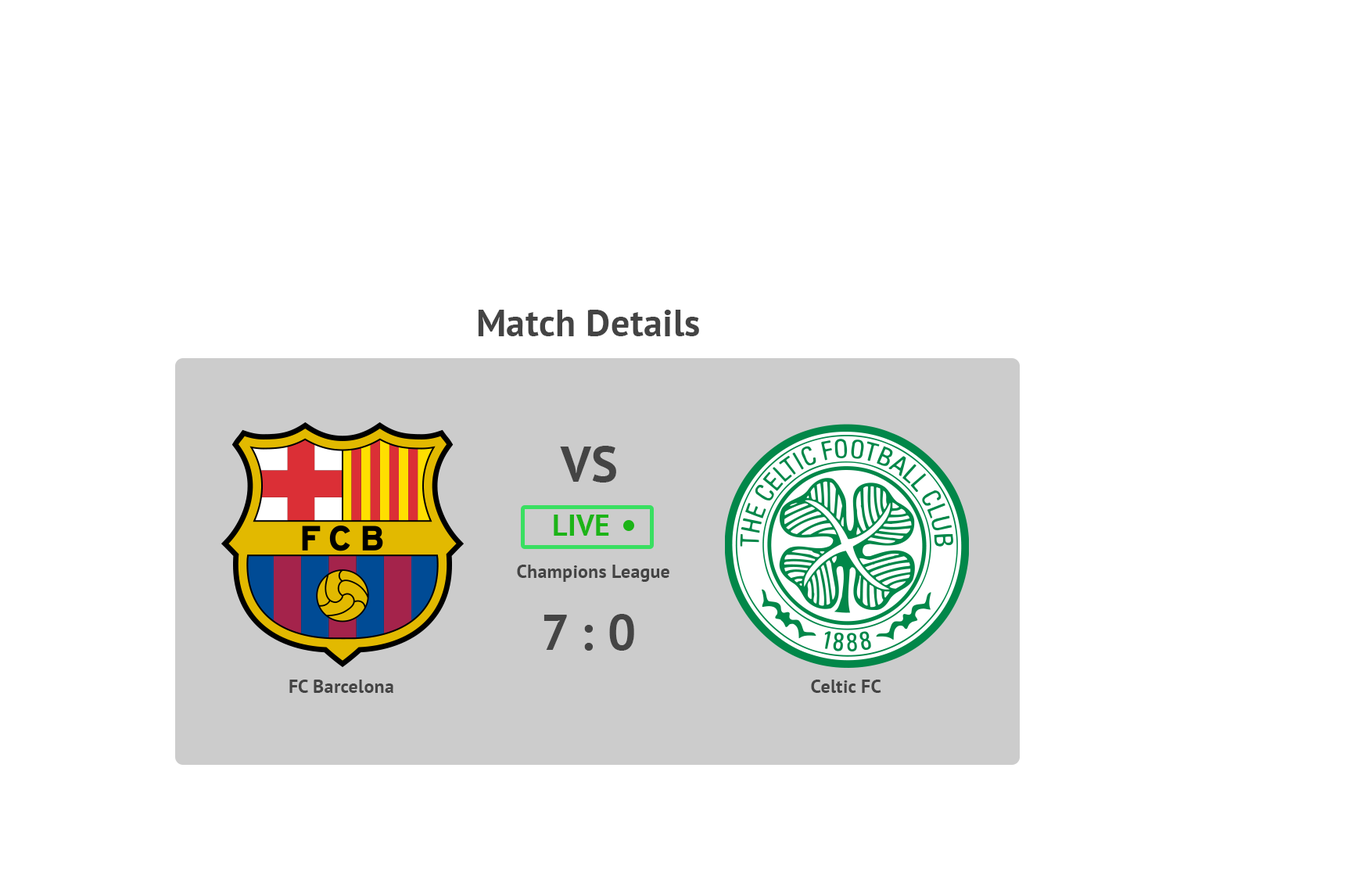
<style>
.page{position:relative;width:1356px;height:879px;background:#ffffff}
.page>*{position:absolute;margin:0}
.t1{font:37.5px "PTSans-Bold";letter-spacing:0.01em;color:#444444}
.t2{font:50.1px "PTSans-Bold";letter-spacing:0.01em;color:#444444}
.t3{font:29.7px "PTSans-Bold";letter-spacing:0.01em;color:#1cb417}
.t4{font:18.8px "PTSans-Bold";letter-spacing:0.01em;color:#444444}
</style>
<div class="page">
<p class="t1" style="left:478px;top:310px;width:221px;height:26px">Match Details</p>
<p class="t2" style="left:560px;top:446px;width:56px;height:37px">VS</p>
<p class="t3" style="left:554px;top:515px;width:55px;height:21px">LIVE</p>
<p class="t4" style="left:517px;top:565px;width:153px;height:17px">Champions League</p>
<p class="t2" style="left:544px;top:614px;width:90px;height:37px">7 : 0</p>
<p class="t4" style="left:289px;top:680px;width:104px;height:13px">FC Barcelona</p>
<p class="t4" style="left:811px;top:680px;width:71px;height:13px">Celtic FC</p>
</div>
